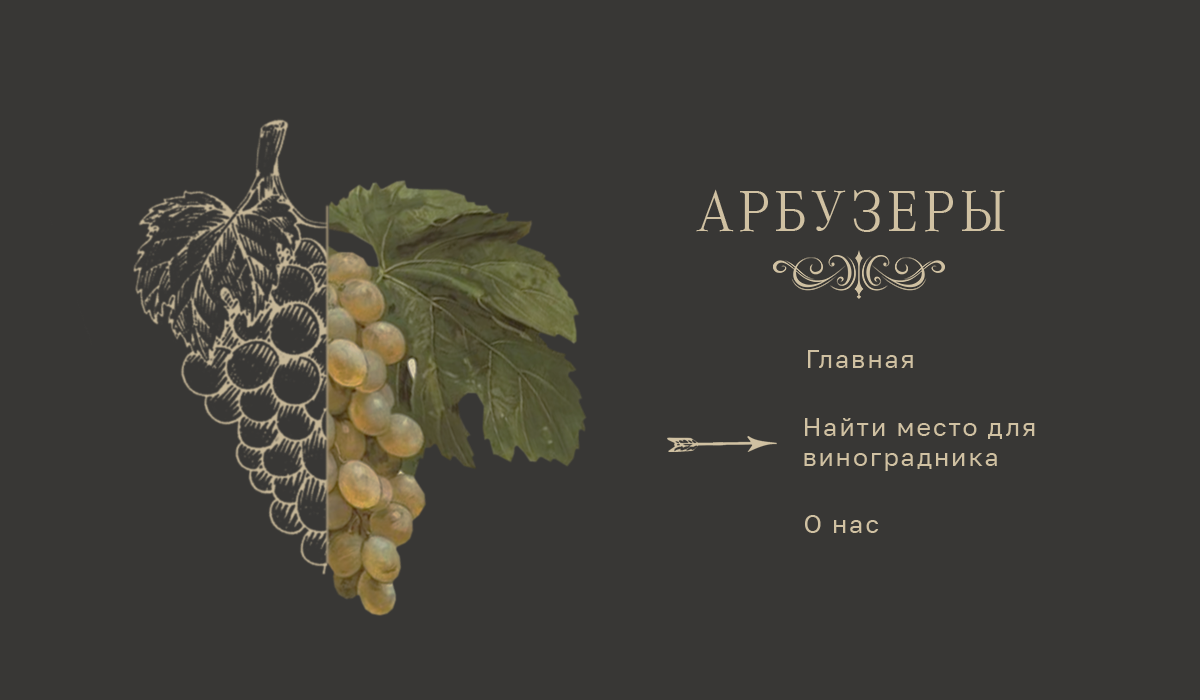
<style>
.page{position:relative;width:1200px;height:700px;background:#383735}
.page>*{position:absolute;margin:0}
.t1{font:59.5px "CorporateAPro-Light";letter-spacing:0.08em;color:#d0c1a2}
.t2{font:25px "GolosText-Regular";letter-spacing:0.08em;color:#d0c1a2}
</style>
<div class="page">
<p class="t1" style="left:696px;top:189px;width:309px;height:43px">АРБУЗЕРЫ</p>
<p class="t2" style="left:808px;top:350px;width:105px;height:18px">Главная</p>
<p class="t2" style="left:804px;top:418px;width:231px;height:53px">Найти место для <br>виноградника</p>
<p class="t2" style="left:805px;top:515px;width:74px;height:18px">О нас</p>
</div>
